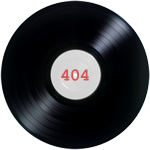
<style>
.page{position:relative;width:150px;height:150px;background:#ffffff}
.page>*{position:absolute;margin:0}
.t1{font:18px "CourierNewPS-BoldMT";color:#d65656}
</style>
<div class="page">
<p class="t1" style="left:61px;top:69px;width:28px;height:12px">404</p>
</div>
